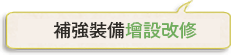
<style>
.page{position:relative;width:231px;height:55px;background:#f6efe8}
.page>*{position:absolute;margin:0}
.t1{font:18px "GothicMB101Pr6N-Medium";color:#2e2b27}
.t2{font:18px "GothicMB101Pr6N-Medium";color:#70ad5c}
</style>
<div class="page">
<p class="t1" style="left:53px;top:21px;width:144px;height:18px">補強裝備<span class="t2">增設改修</span></p>
</div>
